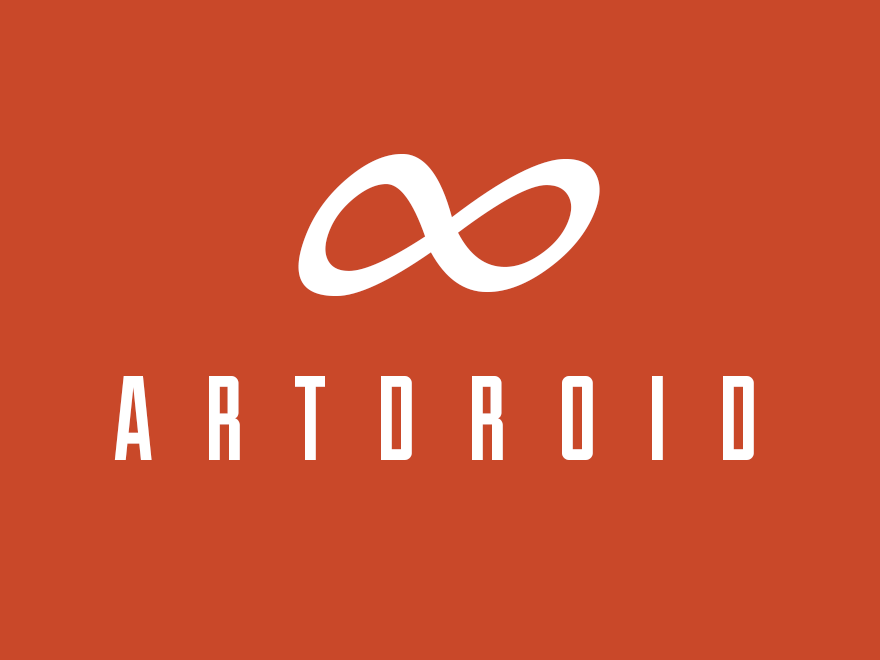
<style>
.page{position:relative;width:880px;height:660px;background:#c94829}
.page>*{position:absolute;margin:0}
.t1{font:409.3px "LucidaHandwriting-Italic";color:#ffffff;scale:0.93 1}
.t2{font:119.6px "Duke-Fill";letter-spacing:0.42em;color:#ffffff;text-transform:uppercase}
</style>
<div class="page">
<p class="t1" style="left:298px;top:154px;width:302px;height:142px">∞</p>
<p class="t2" style="left:114px;top:376px;width:640px;height:84px">Artdroid</p>
</div>
